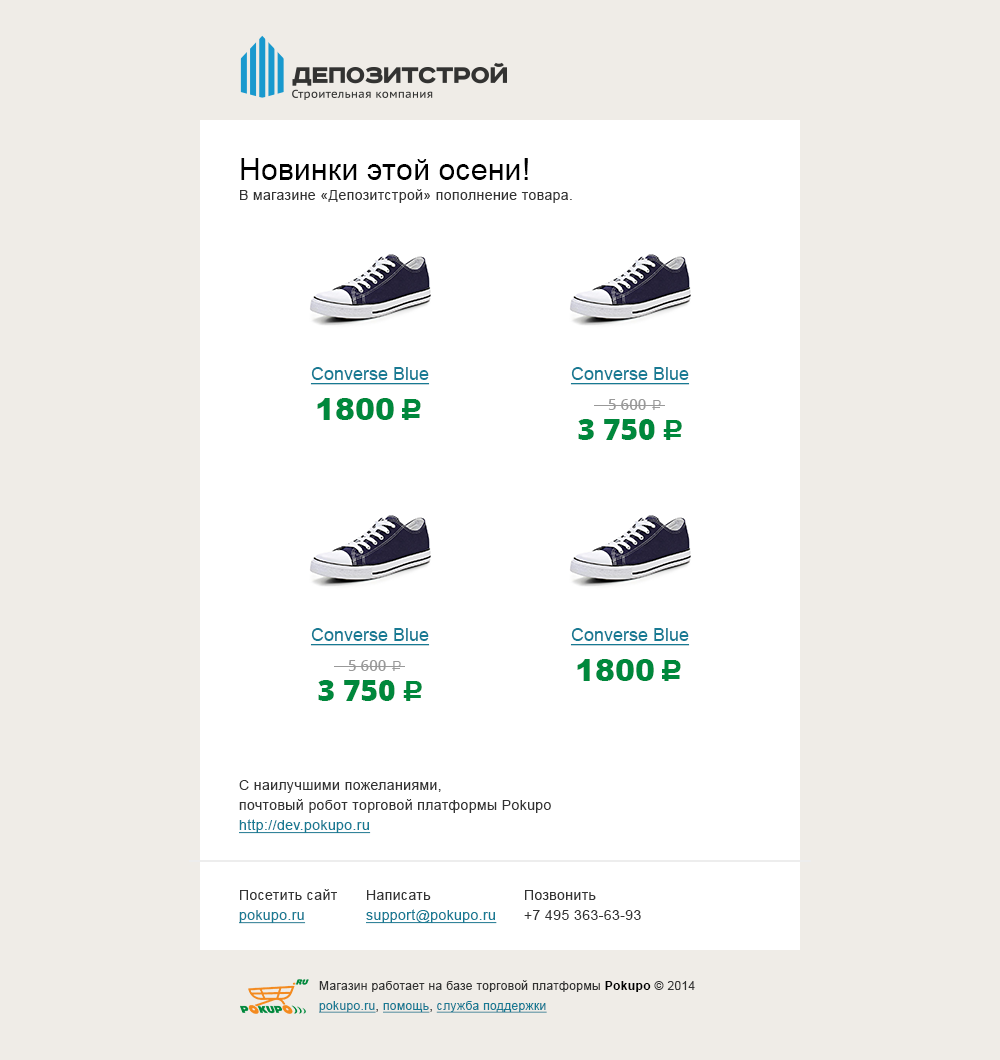
<style>
.page{position:relative;width:1000px;height:1060px;background:#efece7}
.page>*{position:absolute;margin:0}
.t1{font:14px/20px "ArialMT";letter-spacing:0.03em;color:#333333}
.t2{font:30px/20px "ArialMT";letter-spacing:0.01em;color:#000000}
.t3{font:18px "ArialMT";color:#177a93;text-decoration:underline}
.t4{font:30px "Arial-Black";color:#00883c}
.t5{font:30px "ALSRubl";color:#00883c}
.t6{font:15px/30px "OpenSans-Semibold";color:#999999}
.t7{font:14px/30px "ALSRubl";color:#999999}
.t8{font:30px/30px "OpenSans-Extrabold";color:#00883c}
.t9{font:29px/30px "ALSRubl";color:#00883c}
.t10{font:14px/20px "ArialMT";letter-spacing:0.03em;color:#177a93;text-decoration:underline}
.t11{font:12px/20px "ArialMT";letter-spacing:0.03em;color:#333333}
.t12{font:12px/20px "Arial-BoldMT";letter-spacing:0.03em;color:#000000}
.t13{font:12px/20px "ArialMT";letter-spacing:0.03em;color:#177a93;text-decoration:underline}
</style>
<div class="page">
<p class="t1" style="left:240px;top:158px;width:332px;height:45px"><span class="t2">Новинки этой осени!<br></span>В магазине «Депозитстрой» пополнение товара.</p>
<p class="t3" style="left:310px;top:367px;width:120px;height:18px">Converse Blue</p>
<p class="t3" style="left:570px;top:367px;width:120px;height:18px">Converse Blue</p>
<p class="t4" style="left:317px;top:398px;width:104px;height:22px">1800 <span class="t5">c</span></p>
<p class="t6" style="left:578px;top:399px;width:104px;height:41px;text-align:center">5 600 <span class="t7">a<br></span><span class="t8">3 750 </span><span class="t9">c</span></p>
<p class="t3" style="left:310px;top:628px;width:120px;height:18px">Converse Blue</p>
<p class="t3" style="left:570px;top:628px;width:120px;height:18px">Converse Blue</p>
<p class="t6" style="left:318px;top:660px;width:104px;height:41px;text-align:center">5 600 <span class="t7">a<br></span><span class="t8">3 750 </span><span class="t9">c</span></p>
<p class="t4" style="left:577px;top:659px;width:104px;height:22px">1800 <span class="t5">c</span></p>
<p class="t1" style="left:239px;top:780px;width:312px;height:54px">С наилучшими пожеланиями,<br>почтовый робот торговой платформы Pokupo<br><span class="t10">http://dev.pokupo.ru</span></p>
<p class="t1" style="left:239px;top:889px;width:98px;height:35px">Посетить сайт<br><span class="t10">pokupo.ru</span></p>
<p class="t10" style="left:366px;top:890px;width:131px;height:34px"><span class="t1">Написать<br></span>support@pokupo.ru</p>
<p class="t1" style="left:524px;top:890px;width:117px;height:30px">Позвонить<br>+7 495 363-63-93</p>
<p class="t11" style="left:319px;top:980px;width:376px;height:33px">Магазин работает на базе торговой платформы <span class="t12">Pokupo</span> © 2014<br><span class="t13">pokupo.ru</span>, <span class="t13">помощь</span>, <span class="t13">служба поддержки</span></p>
</div>
